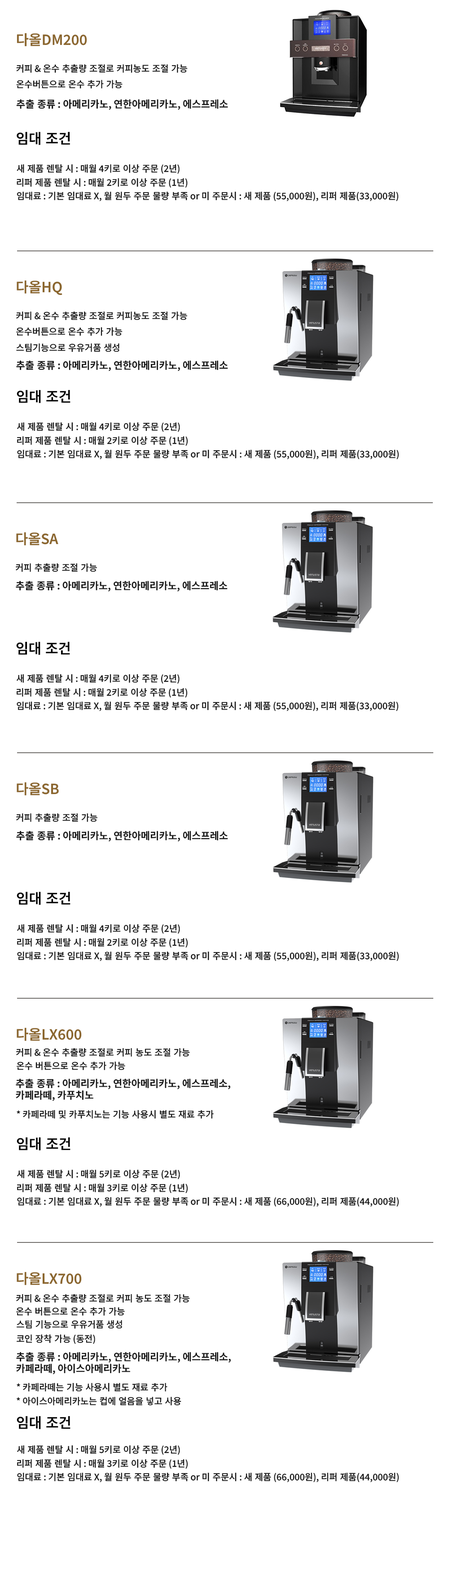
<style>
.page{position:relative;width:449px;height:1571px;background:#ffffff}
.page>*{position:absolute;margin:0}
.t1{font:13.9px "NotoSansKR-SemiBold";color:#8b662d}
.t2{font:9px "NotoSansKR-Medium";color:#151515}
.t3{font:9.9px "NotoSansKR-SemiBold";color:#151515}
.t4{font:13.9px "NotoSansKR-SemiBold";color:#000000}
.t5{font:14px "NotoSansKR-SemiBold";color:#000000}
</style>
<div class="page">
<p class="t1" style="left:17px;top:33px;width:70px;height:13px">다올DM200</p>
<p class="t2" style="left:16px;top:64px;width:172px;height:9px">커피 &amp; 온수 추출량 조절로 커피농도 조절 가능</p>
<p class="t2" style="left:16px;top:80px;width:107px;height:8px">온수버튼으로 온수 추가 가능</p>
<p class="t3" style="left:16px;top:99px;width:212px;height:11px">추출 종류 : 아메리카노, 연한아메리카노, 에스프레소</p>
<p class="t4" style="left:17px;top:131px;width:53px;height:14px">임대 조건</p>
<p class="t2" style="left:17px;top:164px;width:162px;height:10px">새 제품 렌탈 시 : 매월 4키로 이상 주문 (2년)</p>
<p class="t2" style="left:17px;top:178px;width:171px;height:10px">리퍼 제품 렌탈 시 : 매월 2키로 이상 주문 (1년)</p>
<p class="t2" style="left:17px;top:192px;width:381px;height:9px">임대료 : 기본 임대료 X, 월 원두 주문 물량 부족 or 미 주문시 : 새 제품 (55,000원), 리퍼 제품(33,000원)</p>
<p class="t1" style="left:17px;top:280px;width:45px;height:15px">다올HQ</p>
<p class="t2" style="left:16px;top:311px;width:171px;height:9px">커피 &amp; 온수 추출량 조절로 커피농도 조절 가능</p>
<p class="t2" style="left:16px;top:327px;width:107px;height:9px">온수버튼으로 온수 추가 가능</p>
<p class="t2" style="left:16px;top:343px;width:103px;height:9px">스팀기능으로 우유거품 생성</p>
<p class="t3" style="left:16px;top:360px;width:212px;height:11px">추출 종류 : 아메리카노, 연한아메리카노, 에스프레소</p>
<p class="t5" style="left:17px;top:390px;width:53px;height:13px">임대 조건</p>
<p class="t2" style="left:17px;top:422px;width:163px;height:10px">새 제품 렌탈 시 : 매월 4키로 이상 주문 (2년)</p>
<p class="t2" style="left:17px;top:436px;width:171px;height:10px">리퍼 제품 렌탈 시 : 매월 2키로 이상 주문 (1년)</p>
<p class="t2" style="left:17px;top:450px;width:381px;height:10px">임대료 : 기본 임대료 X, 월 원두 주문 물량 부족 or 미 주문시 : 새 제품 (55,000원), 리퍼 제품(33,000원)</p>
<p class="t1" style="left:16px;top:532px;width:42px;height:13px">다올SA</p>
<p class="t2" style="left:16px;top:563px;width:81px;height:9px">커피 추출량 조절 가능</p>
<p class="t3" style="left:16px;top:581px;width:212px;height:10px">추출 종류 : 아메리카노, 연한아메리카노, 에스프레소</p>
<p class="t5" style="left:16px;top:641px;width:54px;height:14px">임대 조건</p>
<p class="t2" style="left:16px;top:674px;width:163px;height:10px">새 제품 렌탈 시 : 매월 4키로 이상 주문 (2년)</p>
<p class="t2" style="left:17px;top:688px;width:170px;height:10px">리퍼 제품 렌탈 시 : 매월 2키로 이상 주문 (1년)</p>
<p class="t2" style="left:17px;top:701px;width:381px;height:10px">임대료 : 기본 임대료 X, 월 원두 주문 물량 부족 or 미 주문시 : 새 제품 (55,000원), 리퍼 제품(33,000원)</p>
<p class="t1" style="left:17px;top:782px;width:42px;height:13px">다올SB</p>
<p class="t2" style="left:16px;top:813px;width:81px;height:9px">커피 추출량 조절 가능</p>
<p class="t3" style="left:16px;top:831px;width:212px;height:10px">추출 종류 : 아메리카노, 연한아메리카노, 에스프레소</p>
<p class="t5" style="left:17px;top:891px;width:53px;height:14px">임대 조건</p>
<p class="t2" style="left:17px;top:924px;width:163px;height:10px">새 제품 렌탈 시 : 매월 4키로 이상 주문 (2년)</p>
<p class="t2" style="left:17px;top:938px;width:171px;height:10px">리퍼 제품 렌탈 시 : 매월 2키로 이상 주문 (1년)</p>
<p class="t2" style="left:17px;top:951px;width:381px;height:10px">임대료 : 기본 임대료 X, 월 원두 주문 물량 부족 or 미 주문시 : 새 제품 (55,000원), 리퍼 제품(33,000원)</p>
<p class="t1" style="left:17px;top:1027px;width:65px;height:14px">다올LX600</p>
<p class="t2" style="left:16px;top:1048px;width:174px;height:8px">커피 &amp; 온수 추출량 조절로 커피 농도 조절 가능</p>
<p class="t2" style="left:17px;top:1061px;width:108px;height:9px">온수 버튼으로 온수 추가 가능</p>
<p class="t3" style="left:16px;top:1078px;width:214px;height:23px">추출 종류 : 아메리카노, 연한아메리카노, 에스프레소,<br>카페라떼, 카푸치노</p>
<p class="t2" style="left:17px;top:1110px;width:197px;height:8px">* 카페라떼 및 카푸치노는 기능 사용시 별도 재료 추가</p>
<p class="t5" style="left:17px;top:1137px;width:53px;height:13px">임대 조건</p>
<p class="t2" style="left:17px;top:1169px;width:163px;height:10px">새 제품 렌탈 시 : 매월 5키로 이상 주문 (2년)</p>
<p class="t2" style="left:17px;top:1183px;width:171px;height:10px">리퍼 제품 렌탈 시 : 매월 3키로 이상 주문 (1년)</p>
<p class="t2" style="left:17px;top:1197px;width:381px;height:10px">임대료 : 기본 임대료 X, 월 원두 주문 물량 부족 or 미 주문시 : 새 제품 (66,000원), 리퍼 제품(44,000원)</p>
<p class="t1" style="left:17px;top:1271px;width:65px;height:14px">다올LX700</p>
<p class="t2" style="left:16px;top:1294px;width:174px;height:8px">커피 &amp; 온수 추출량 조절로 커피 농도 조절 가능</p>
<p class="t2" style="left:16px;top:1307px;width:109px;height:8px">온수 버튼으로 온수 추가 가능</p>
<p class="t2" style="left:17px;top:1320px;width:105px;height:8px">스팀 기능으로 우유거품 생성</p>
<p class="t2" style="left:17px;top:1334px;width:78px;height:10px">코인 장착 가능 (동전)</p>
<p class="t3" style="left:16px;top:1352px;width:215px;height:22px">추출 종류 : 아메리카노, 연한아메리카노, 에스프레소,<br>카페라떼, 아이스아메리카노</p>
<p class="t2" style="left:17px;top:1383px;width:150px;height:8px">* 카페라떼는 기능 사용시 별도 재료 추가</p>
<p class="t2" style="left:17px;top:1396px;width:164px;height:9px">* 아이스아메리카노는 컵에 얼음을 넣고 사용</p>
<p class="t5" style="left:17px;top:1415px;width:53px;height:14px">임대 조건</p>
<p class="t2" style="left:17px;top:1445px;width:163px;height:10px">새 제품 렌탈 시 : 매월 5키로 이상 주문 (2년)</p>
<p class="t2" style="left:17px;top:1459px;width:171px;height:10px">리퍼 제품 렌탈 시 : 매월 3키로 이상 주문 (1년)</p>
<p class="t2" style="left:17px;top:1472px;width:381px;height:10px">임대료 : 기본 임대료 X, 월 원두 주문 물량 부족 or 미 주문시 : 새 제품 (66,000원), 리퍼 제품(44,000원)</p>
</div>
